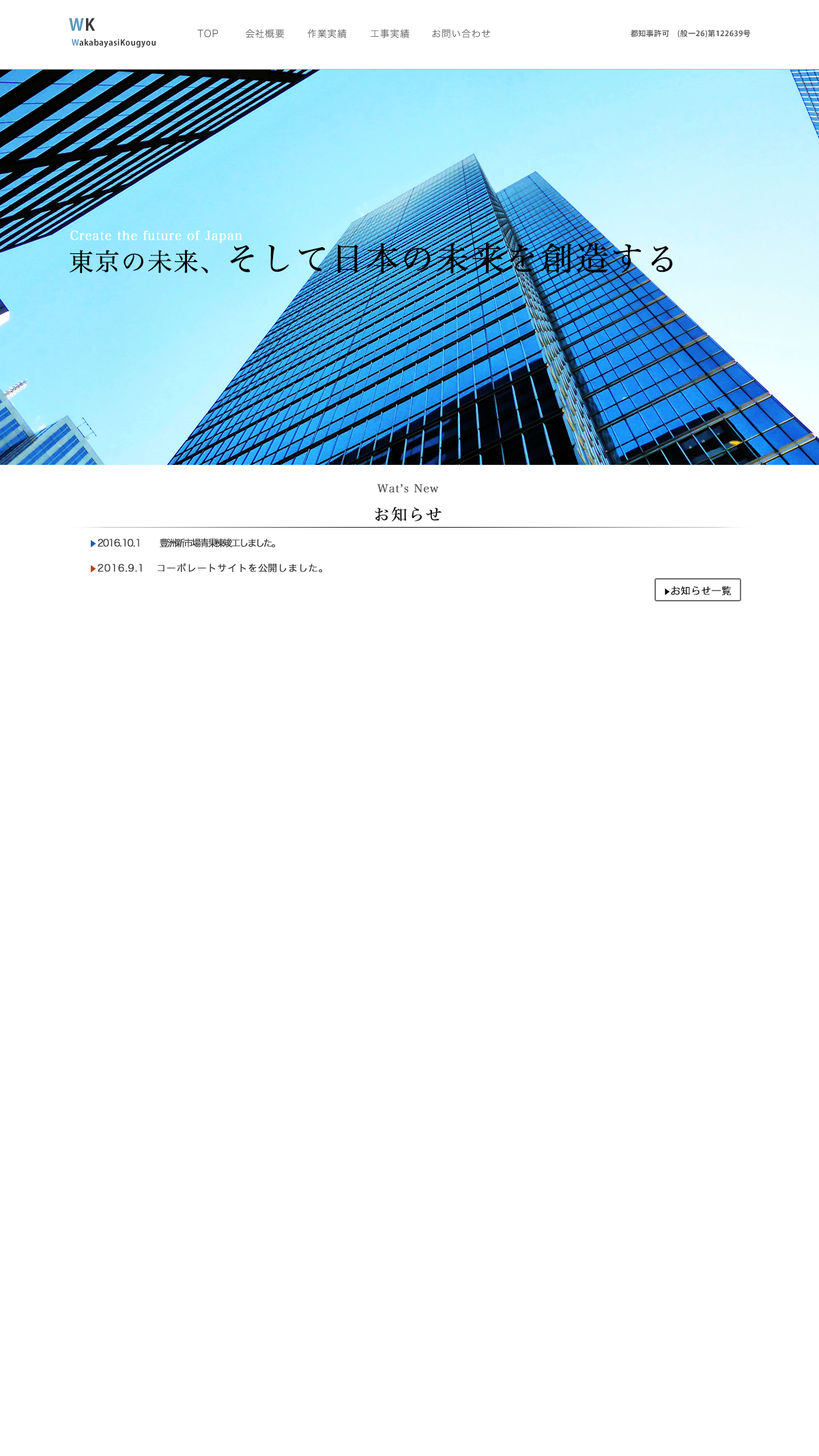
<style>
.page{position:relative;width:819px;height:1456px;background:#ffffff}
.page>*{position:absolute;margin:0}
.t1{font:16.4px "KozGoPr6N-Bold";letter-spacing:0.04em;color:#5b97b9}
.t2{font:16.4px "KozGoPr6N-Bold";letter-spacing:0.04em;color:#393939}
.t3{font:9.6px "HiraginoSans-W3";letter-spacing:0.04em;color:#575757}
.t4{font:7.5px "KozGoPr6N-Bold";letter-spacing:0.04em;color:#5b5b5b}
.t5{font:8.2px "KozGoPr6N-Bold";letter-spacing:0.04em;color:#393939}
.t6{font:8.2px "KozGoPr6N-Bold";letter-spacing:0.04em;color:#5b97b9}
.t7{font:12.3px "HiraMinPro-W3";letter-spacing:0.04em;color:#ffffff;font-weight:bold}
.t8{font:32.8px "HiraMinPro-W3";letter-spacing:0.04em;color:#000000;font-weight:bold}
.t9{font:24.6px "HiraMinPro-W3";letter-spacing:0.04em;color:#000000;font-weight:bold}
.t10{font:10.9px/23.2px "HiraMinPro-W3";letter-spacing:0.04em;color:#585858;font-weight:bold}
.t11{font:16.4px/23.2px "HiraMinPro-W3";letter-spacing:0.04em;color:#000000;font-weight:bold}
.t12{font:16.4px/23.2px "HiraMinPro-W3";letter-spacing:0.04em;color:#131313;font-weight:bold}
.t13{font:9.6px/23.2px "HiraKakuProN-W3";letter-spacing:0.04em;color:#333333;font-weight:bold}
.t14{font:7.5px/23.2px "HiraKakuProN-W3";letter-spacing:0.04em;color:#155eb9;font-weight:bold}
.t15{font:7.5px/23.2px "HiraKakuProN-W3";letter-spacing:0.04em;color:#b94315;font-weight:bold}
.t16{font:9.6px "KozGoPr6N-Regular";letter-spacing:0.04em;color:#000000;font-weight:bold}
.t17{font:6.8px "KozGoPr6N-Regular";letter-spacing:0.04em;color:#000000;font-weight:bold}
</style>
<div class="page">
<p class="t1" style="left:69px;top:18px;width:27px;height:13px">W<span class="t2">K</span></p>
<p class="t3" style="left:197px;top:29px;width:21px;height:9px">TOP</p>
<p class="t3" style="left:245px;top:29px;width:40px;height:9px">会社概要</p>
<p class="t3" style="left:307px;top:29px;width:40px;height:9px">作業実績</p>
<p class="t3" style="left:371px;top:29px;width:39px;height:9px">工事実績</p>
<p class="t3" style="left:432px;top:29px;width:59px;height:9px">お問い合わせ</p>
<p class="t4" style="left:631px;top:29px;width:120px;height:9px">都知事許可　(般一26)第122639号</p>
<p class="t5" style="left:72px;top:39px;width:84px;height:9px"><span class="t6">W</span>akabayasiKougyou</p>
<p class="t7" style="left:70px;top:230px;width:172px;height:13px">Create the future of Japan</p>
<p class="t8" style="left:70px;top:243px;width:603px;height:31px"><span class="t9">東京の未来、</span>そして日本の未来を創造する</p>
<p class="t10" style="left:375px;top:484px;width:67px;height:37px;text-align:center"><span class="t11"><br></span>Wat’s New<br><span class="t12">お知らせ</span></p>
<p class="t13" style="left:91px;top:538px;width:231px;height:35px"><span class="t14">▶︎</span>2016.10.1      豊洲新市場青果棟竣工しました。<br><span class="t15">▶︎</span>2016.9.1   コーポレートサイトを公開しました。</p>
<p class="t16" style="left:665px;top:586px;width:66px;height:9px"><span class="t17">▶︎</span>お知らせ一覧</p>
</div>
